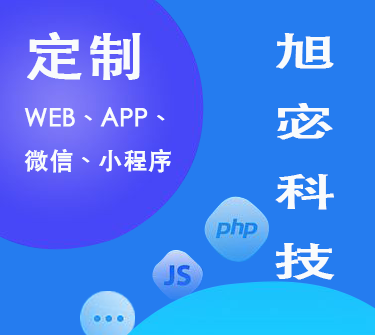
<style>
.page{position:relative;width:375px;height:335px;background:#257cef}
.page>*{position:absolute;margin:0}
.t1{font:51.8px "STHeitiTC-Medium";color:#f9fbfc;font-weight:bold;scale:1.14 1}
.t2{font:40px "STHeitiTC-Medium";color:#f9fbfc;font-weight:bold;scale:1.56 1}
.t3{font:24px "STHeitiTC-Medium";color:#f9fbfc;font-weight:bold}
</style>
<div class="page">
<p class="t1" style="left:27px;top:32px;width:114px;height:48px">定制</p>
<p class="t2" style="left:275px;top:33px;width:60px;height:247px">旭<br>宓<br>科<br>技</p>
<p class="t3" style="left:24px;top:107px;width:147px;height:66px">WEB、APP、<br>微信、小程序</p>
</div>
